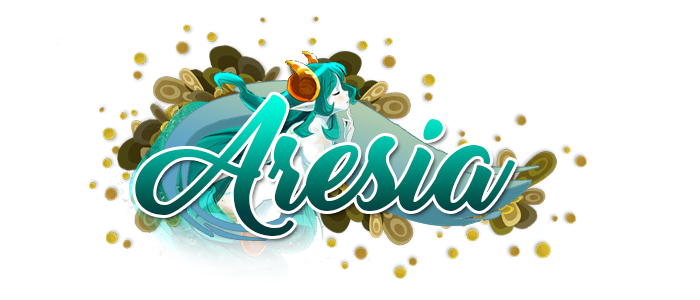
<style>
.page{position:relative;width:700px;height:300px;background:#ffffff}
.page>*{position:absolute;margin:0}
.t1{font:110px "ThinkingOfBetty"}
</style>
<div class="page">
<p class="t1" style="left:135px;top:94px;width:380px;height:142px">Aresia</p>
</div>
